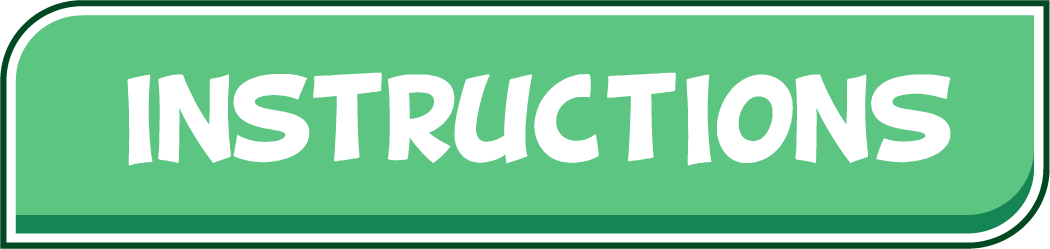
<style>
.page{position:relative;width:1050px;height:249px;background:#5cc582}
.page>*{position:absolute;margin:0}
.t1{font:96px "BDCartoonShout";color:#ffffff}
</style>
<div class="page">
<p class="t1" style="left:127px;top:72px;width:824px;height:94px">InstructIonS</p>
</div>
